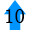
<style>
.page{position:relative;width:30px;height:30px;background:#ffffff}
.page>*{position:absolute;margin:0}
.t1{font:20.8px "SimSun";color:#000000}
</style>
<div class="page">
<p class="t1" style="left:6px;top:9px;width:18px;height:14px">10</p>
</div>
